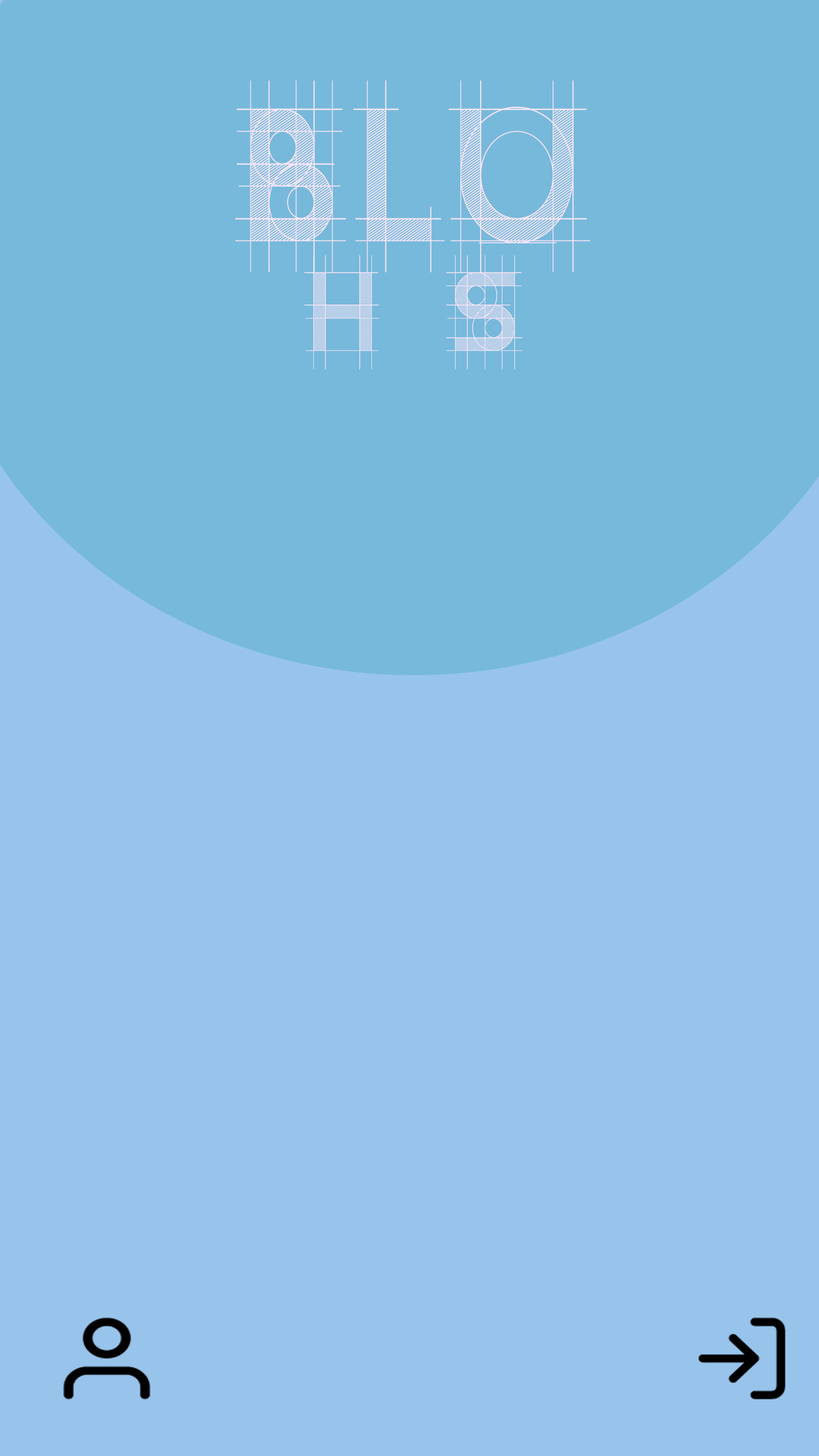
<style>
.page{position:relative;width:819px;height:1456px;background:#98c4ec}
.page>*{position:absolute;margin:0}
.t1{font:210.1px "R&C-Demo";color:#f8e7f8;scale:0.83 1}
.t2{font:125.2px "R&C-Demo";color:#f8e7f8;scale:0.91 1}
</style>
<div class="page">
<p class="t1" style="left:235px;top:80px;width:356px;height:192px">BLU</p>
<p class="t2" style="left:304px;top:255px;width:218px;height:114px">H S</p>
</div>
